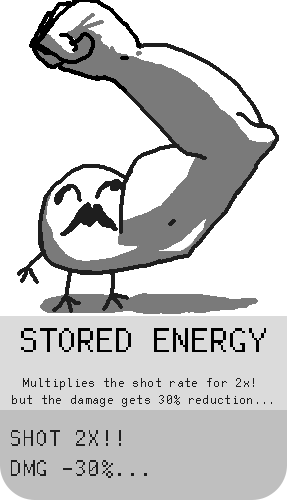
<style>
.page{position:relative;width:287px;height:500px;background:#ffffff}
.page>*{position:absolute;margin:0}
.t1{font:37.5px "FreePixel-Regular";color:#000000}
.t2{font:14.1px "FreePixel-Regular";color:#1e1e1e}
.t3{font:25px "FreePixel-Regular";color:#1e1e1e}
</style>
<div class="page">
<p class="t1" style="left:21px;top:328px;width:245px;height:24px">STORED ENERGY</p>
<p class="t2" style="left:12px;top:378px;width:260px;height:29px;text-align:center">Multiplies the shot rate for 2x! <br>but the damage gets 30% reduction...</p>
<p class="t3" style="left:11px;top:430px;width:136px;height:48px">SHOT 2X!!<br>DMG -30%...</p>
</div>
